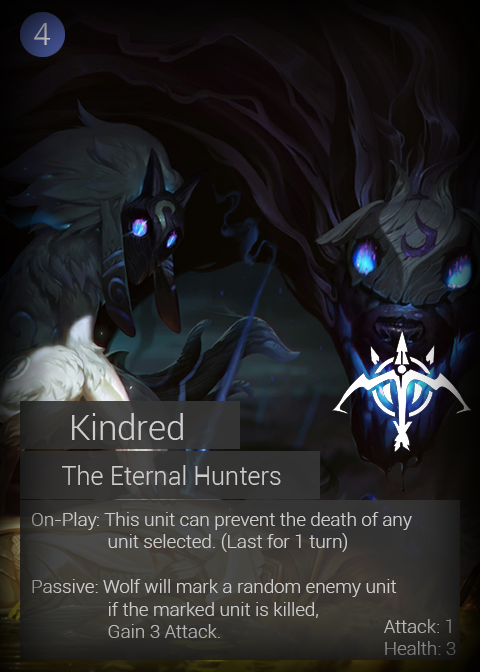
<style>
.page{position:relative;width:480px;height:672px}
.page>*{position:absolute;margin:0}
.t1{font:32px "Roboto-Light";color:#a9a9a9}
.t2{font:34.7px "Roboto-Light";color:#cdcdcd}
.t3{font:25.3px "Roboto-Light";color:#cdcdcd}
.t4{font:18.7px "Roboto-Light";color:#cdcdcd}
.t5{font:18.7px "Roboto-Light"}
</style>
<div class="page">
<p class="t1" style="left:34px;top:23px;width:17px;height:22px">4</p>
<p class="t2" style="left:72px;top:413px;width:111px;height:27px">Kindred</p>
<p class="t3" style="left:62px;top:465px;width:219px;height:20px">The Eternal Hunters</p>
<p class="t4" style="left:32px;top:512px;width:380px;height:126px">On-Play: This unit can prevent the death of any<br>   unit selected. (Last for 1 turn)<br><br>Passive: Wolf will mark a random enemy unit<br>   if the marked unit is killed, <br>   Gain 3 Attack.</p>
<p class="t5" style="left:384px;top:619px;width:72px;height:36px">Attack: 1<br>Health: 3</p>
</div>
